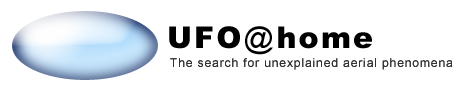
<style>
.page{position:relative;width:464px;height:91px;background:#ffffff}
.page>*{position:absolute;margin:0}
.t1{font:30px "Arial-Black";letter-spacing:0.075em;color:#000000}
.t2{font:30px "ArialMT";letter-spacing:0.075em;color:#000000}
.t3{font:12px "ArialMT";letter-spacing:0.075em;color:#333333}
</style>
<div class="page">
<p class="t1" style="left:169px;top:26px;width:203px;height:29px">UFO<span class="t2">@</span>home</p>
<p class="t3" style="left:170px;top:58px;width:283px;height:12px">The search for unexplained aerial phenomena</p>
</div>
